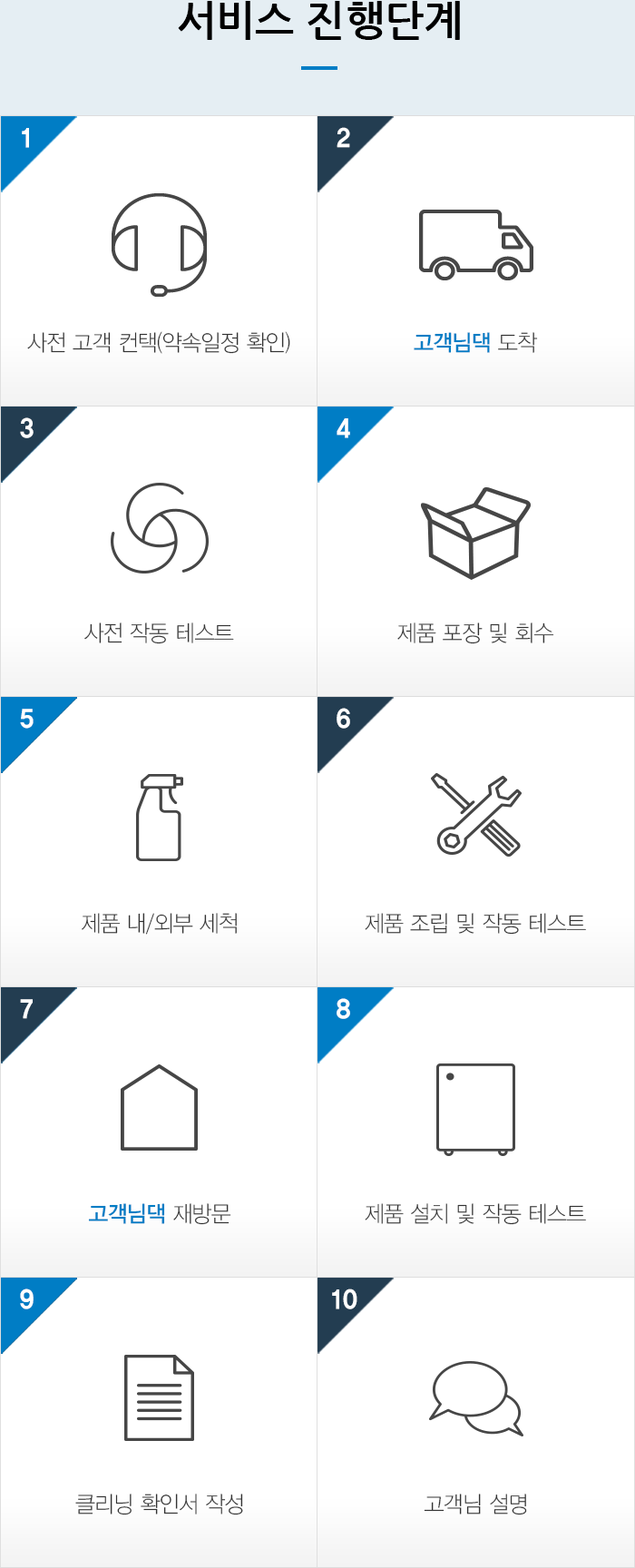
<style>
.page{position:relative;width:635px;height:1568px;background:#ffffff}
.page>*{position:absolute;margin:0}
.t1{font:41.7px "NanumGothicBold";color:#000000}
.t2{font:25.4px "YDVYGO36";letter-spacing:-0.025em;color:#ffffff;scale:0.95 1}
.t3{font:22.7px "YDVYGO31";letter-spacing:-0.025em;color:#333333;scale:0.95 1}
.t4{font:22.7px "YDVYGO33";letter-spacing:-0.025em;color:#007dc5;scale:0.95 1}
</style>
<div class="page">
<p class="t1" style="left:178px;top:1px;width:282px;height:39px">서비스 진행단계</p>
<p class="t2" style="left:22px;top:128px;width:7px;height:20px">1</p>
<p class="t2" style="left:337px;top:127px;width:13px;height:21px">2</p>
<p class="t3" style="left:27px;top:331px;width:263px;height:23px">사전 고객 컨택(약속일정 확인)</p>
<p class="t4" style="left:414px;top:332px;width:124px;height:21px">고객님댁<span class="t3"> 도착</span></p>
<p class="t2" style="left:20px;top:417px;width:14px;height:21px">3</p>
<p class="t2" style="left:337px;top:418px;width:13px;height:20px">4</p>
<p class="t3" style="left:84px;top:622px;width:150px;height:22px">사전 작동 테스트</p>
<p class="t3" style="left:397px;top:622px;width:157px;height:22px">제품 포장 및 회수</p>
<p class="t2" style="left:20px;top:709px;width:14px;height:20px">5</p>
<p class="t2" style="left:337px;top:708px;width:13px;height:21px">6</p>
<p class="t3" style="left:82px;top:913px;width:155px;height:22px">제품 내/외부 세척</p>
<p class="t3" style="left:365px;top:913px;width:221px;height:22px">제품 조립 및 작동 테스트</p>
<p class="t2" style="left:20px;top:999px;width:13px;height:20px">7</p>
<p class="t2" style="left:337px;top:998px;width:13px;height:21px">8</p>
<p class="t4" style="left:88px;top:1203px;width:143px;height:22px">고객님댁<span class="t3"> 재방문</span></p>
<p class="t3" style="left:365px;top:1203px;width:221px;height:22px">제품 설치 및 작동 테스트</p>
<p class="t2" style="left:20px;top:1289px;width:14px;height:20px">9</p>
<p class="t2" style="left:332px;top:1289px;width:26px;height:20px">10</p>
<p class="t3" style="left:75px;top:1494px;width:168px;height:21px">클리닝 확인서 작성</p>
<p class="t3" style="left:424px;top:1494px;width:103px;height:21px">고객님 설명</p>
</div>
